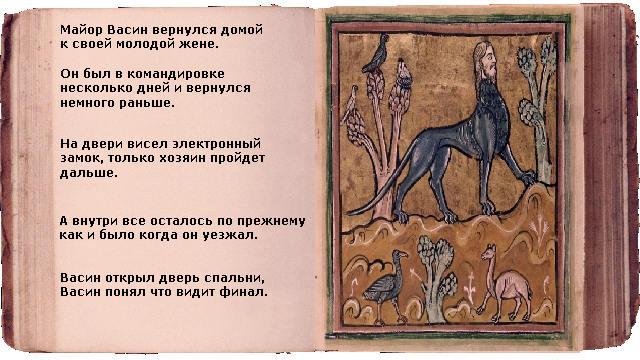
<style>
.page{position:relative;width:640px;height:360px}
.page>*{position:absolute;margin:0}
.t1{font:12px "Verdana-Bold";color:#000000}
</style>
<div class="page">
<p class="t1" style="left:61px;top:24px;width:201px;height:26px;text-align:right">Майор Васин вернулся домой<br>к своей молодой жене.</p>
<p class="t1" style="left:61px;top:68px;width:189px;height:41px;text-align:right">Он был в командировке<br>несколько дней и вернулся<br>немного раньше.</p>
<p class="t1" style="left:60px;top:138px;width:205px;height:41px;text-align:right">На двери висел электронный<br>замок, только хозяин пройдет<br>дальше.</p>
<p class="t1" style="left:60px;top:216px;width:245px;height:25px;text-align:right">А внутри все осталось по прежнему<br>как и было когда он уезжал.</p>
<p class="t1" style="left:61px;top:273px;width:206px;height:25px;text-align:right">Васин открыл дверь спальни,<br>Васин понял что видит финал.</p>
</div>
